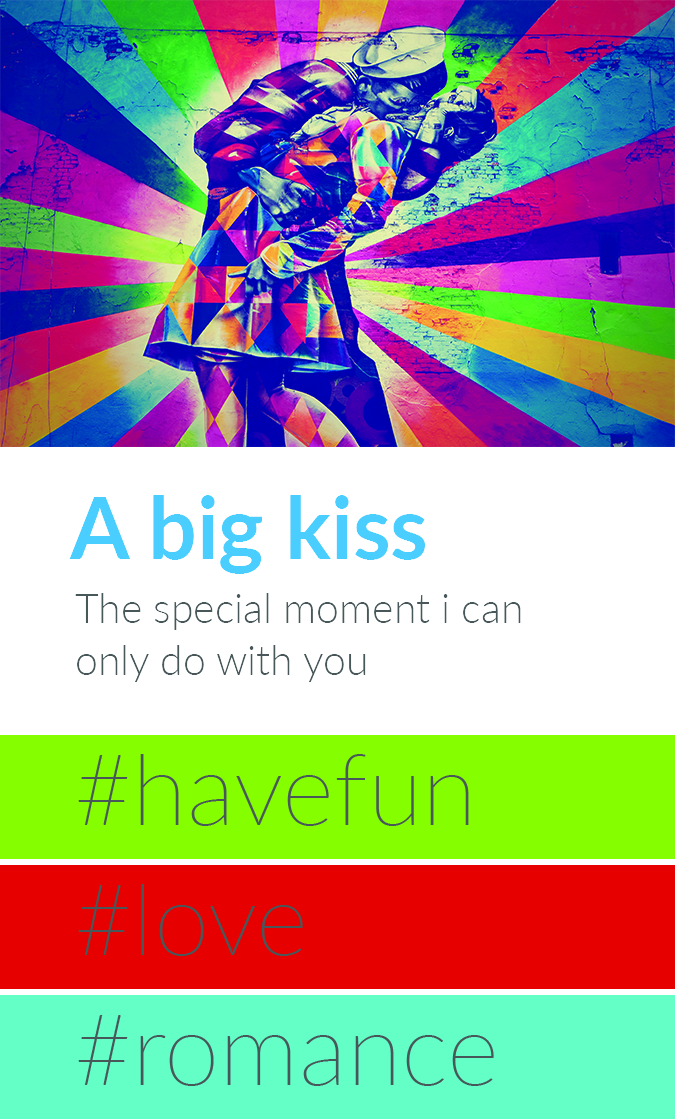
<style>
.page{position:relative;width:675px;height:1119px;background:#ffffff}
.page>*{position:absolute;margin:0}
.t1{font:86px "Lato-Bold";color:#4acdff}
.t2{font:41px/52px "Lato-Light";color:#48585a}
</style>
<div class="page">
<p class="t1" style="left:69px;top:495px;width:356px;height:79px">A big kiss</p>
<p class="t2" style="left:75px;top:593px;width:446px;height:89px;text-align:right">The special moment i can only do with you</p>
</div>
